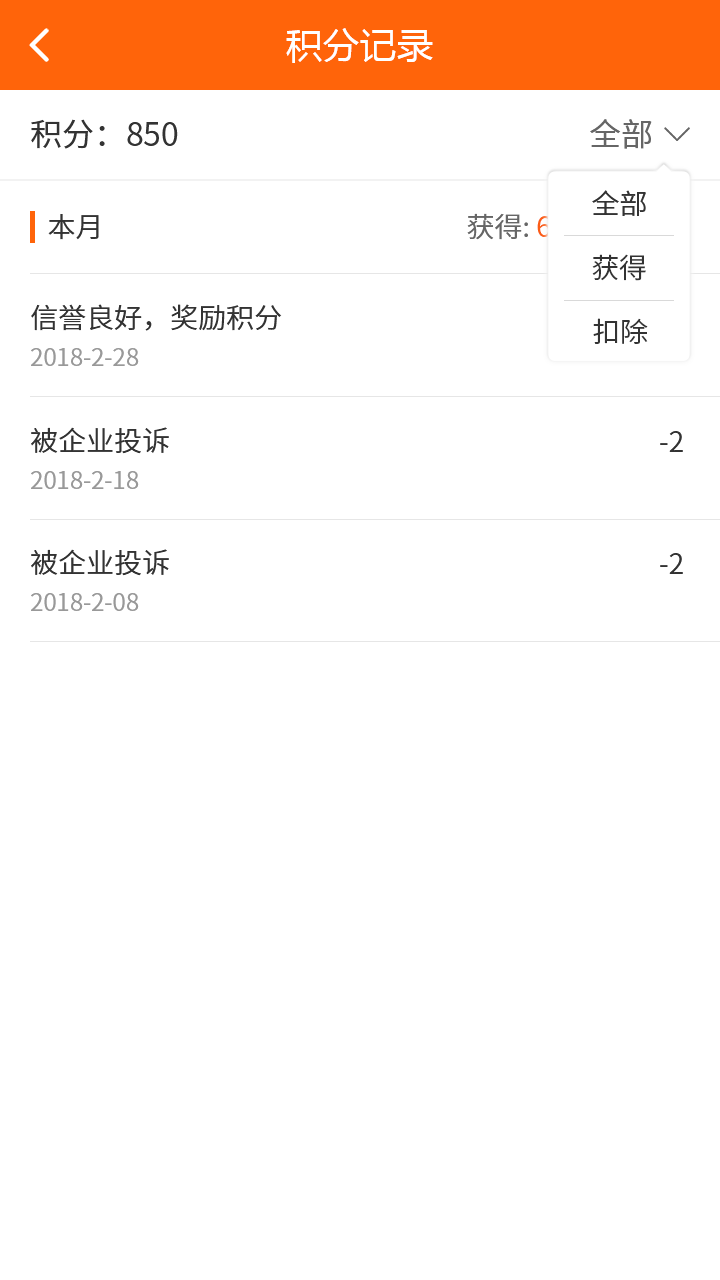
<style>
.page{position:relative;width:720px;height:1280px;background:#ffffff}
.page>*{position:absolute;margin:0}
.t1{font:36px "MicrosoftYaHei";letter-spacing:0.03em;color:#ffffff}
.t2{font:32px "NotoSansCJKsc-Regular";color:#333333;font-variant:small-caps}
.t3{font:32px "NotoSansCJKsc-Regular";color:#666666;font-variant:small-caps}
.t4{font:28px "NotoSansCJKsc-DemiLight";color:#333333}
.t5{font:28px "NotoSansCJKsc-DemiLight";color:#666666}
.t6{font:28px "NotoSansCJKsc-Regular";color:#fb5d15}
.t7{font:24px "NotoSansCJKsc-DemiLight";color:#999999}
</style>
<div class="page">
<p class="t1" style="left:286px;top:28px;width:147px;height:35px">积分记录</p>
<p class="t2" style="left:31px;top:119px;width:147px;height:30px">积分：850</p>
<p class="t3" style="left:590px;top:119px;width:62px;height:30px">全部</p>
<p class="t4" style="left:592px;top:190px;width:54px;height:26px">全部</p>
<p class="t4" style="left:48px;top:214px;width:51px;height:26px">本月</p>
<p class="t5" style="left:467px;top:213px;width:99px;height:27px">获得: <span class="t6">60</span></p>
<p class="t4" style="left:592px;top:254px;width:54px;height:27px">获得</p>
<p class="t4" style="left:31px;top:304px;width:251px;height:27px">信誉良好，奖励积分</p>
<p class="t4" style="left:593px;top:318px;width:55px;height:26px">扣除</p>
<p class="t7" style="left:31px;top:348px;width:108px;height:18px">2018-2-28</p>
<p class="t4" style="left:31px;top:427px;width:138px;height:27px">被企业投诉</p>
<p class="t4" style="left:660px;top:431px;width:23px;height:21px">-2</p>
<p class="t7" style="left:31px;top:471px;width:108px;height:18px">2018-2-18</p>
<p class="t4" style="left:31px;top:549px;width:138px;height:27px">被企业投诉</p>
<p class="t4" style="left:660px;top:553px;width:23px;height:21px">-2</p>
<p class="t7" style="left:31px;top:593px;width:108px;height:18px">2018-2-08</p>
</div>
